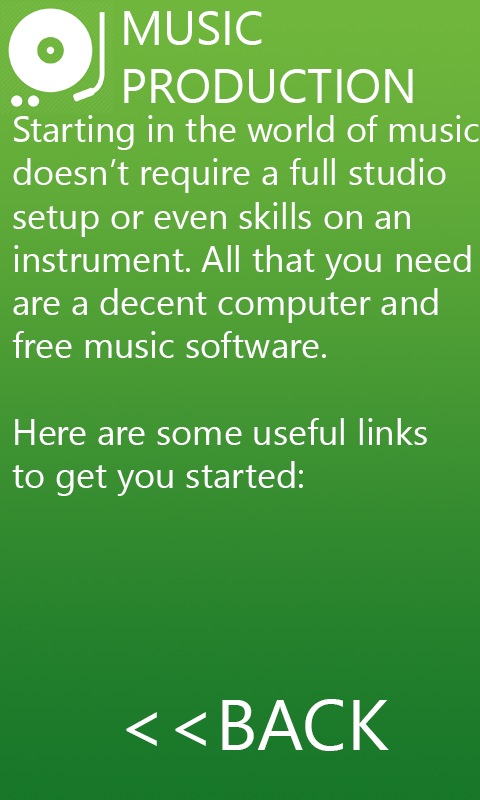
<style>
.page{position:relative;width:480px;height:800px}
.page>*{position:absolute;margin:0}
.t1{font:48px "SegoeUIHistoric";color:#ffffff}
.t2{font:36px "SegoeUIHistoric";color:#ffffff}
.t3{font:72px "SegoeUIHistoric";color:#ffffff}
</style>
<div class="page">
<p class="t1" style="left:124px;top:11px;width:289px;height:92px">MUSIC<br>PRODUCTION</p>
<p class="t2" style="left:12px;top:115px;width:467px;height:381px">Starting in the world of music<br>doesn’t require a full studio<br>setup or even skills on an<br>instrument. All that you need<br>are a decent computer and<br>free music software.<br><br>Here are some useful links<br>to get you started:</p>
<p class="t3" style="left:126px;top:699px;width:263px;height:52px">&lt;&lt;BACK</p>
</div>
